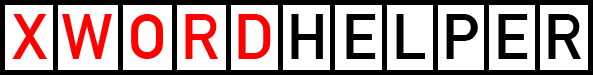
<style>
.page{position:relative;width:593px;height:75px;background:#ffffff}
.page>*{position:absolute;margin:0}
.t1{font:62.5px "DINAlternate-Bold";color:#ff0000}
.t2{font:62.5px "DINAlternate-Bold";color:#000000}
</style>
<div class="page">
<p class="t1" style="left:12px;top:14px;width:259px;height:45px">X W O R D</p>
<p class="t2" style="left:291px;top:14px;width:290px;height:45px">H E L P E R</p>
</div>
